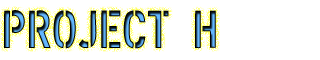
<style>
.page{position:relative;width:320px;height:60px;background:#ffffff}
.page>*{position:absolute;margin:0}
.t1{font:52.7px "XXIISTRAIGHT-ARMY"}
</style>
<div class="page">
<p class="t1" style="left:4px;top:10px;width:212px;height:39px">PROJECT H</p>
</div>
